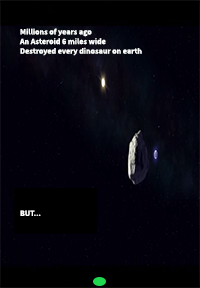
<style>
.page{position:relative;width:200px;height:288px}
.page>*{position:absolute;margin:0}
.t1{font:8px "SourceSansPro-Bold";color:#f9fcfa}
</style>
<div class="page">
<p class="t1" style="left:19px;top:28px;width:123px;height:28px">Millions of years ago<br>An Asteroid 6 miles wide<br>Destroyed every dinosaur on earth</p>
<p class="t1" style="left:20px;top:210px;width:21px;height:6px">BUT...</p>
</div>
